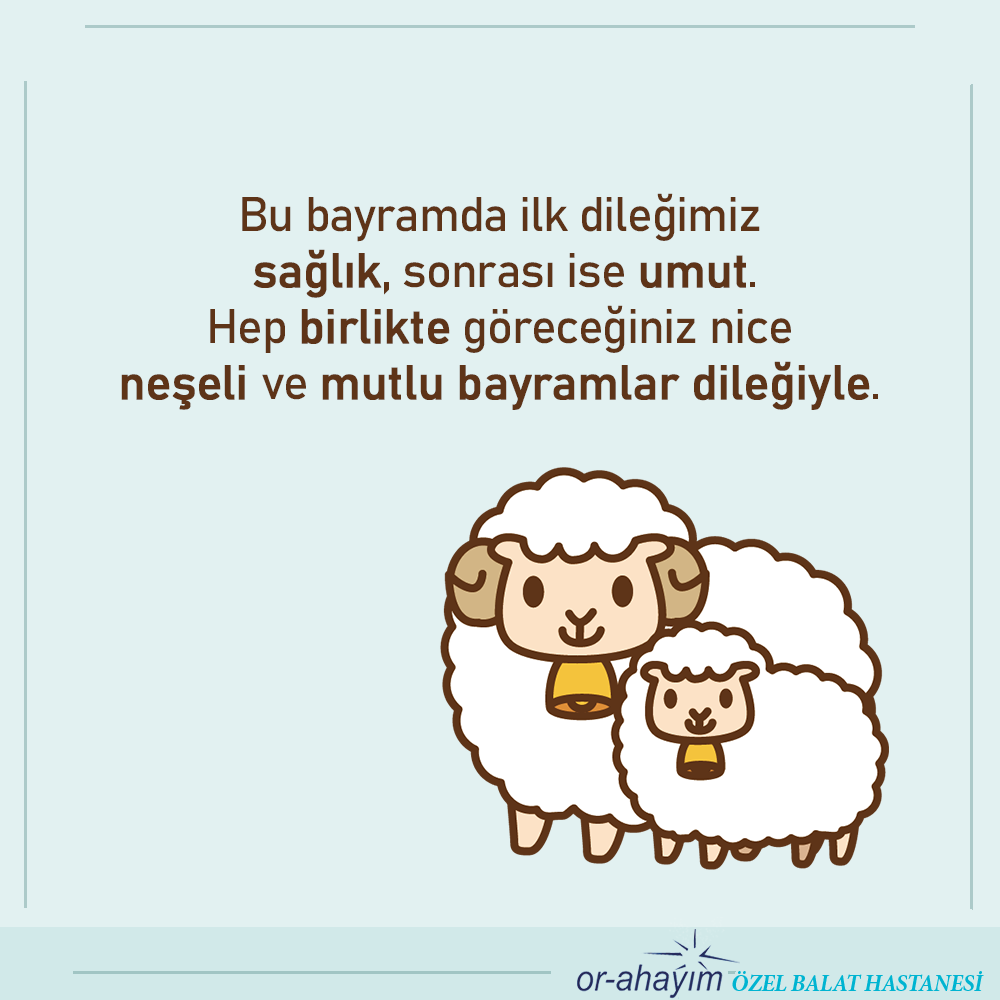
<style>
.page{position:relative;width:1000px;height:1000px;background:#e2f1f1}
.page>*{position:absolute;margin:0}
.t1{font:48px/56px "Bahnschrift";letter-spacing:-0.025em;color:#5e3418}
.t2{font:48px/56px "Bahnschrift";letter-spacing:-0.025em;color:#5e3418;font-weight:bold}
</style>
<div class="page">
<p class="t1" style="left:121px;top:193px;width:757px;height:217px;text-align:center">Bu bayramda ilk dileğimiz <br><span class="t2">sağlık</span>, sonrası ise <span class="t2">umut</span>.<br>Hep <span class="t2">birlikte</span> göreceğiniz nice <br><span class="t2">neşeli </span>ve <span class="t2">mutlu bayramlar dileğiyle</span>.</p>
</div>
